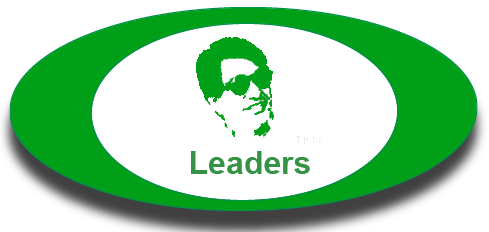
<style>
.page{position:relative;width:489px;height:232px;background:#ffffff}
.page>*{position:absolute;margin:0}
.t1{font:32px "Arial-BoldMT";color:#369244}
</style>
<div class="page">
<p class="t1" style="left:191px;top:151px;width:119px;height:23px">Leaders</p>
</div>
